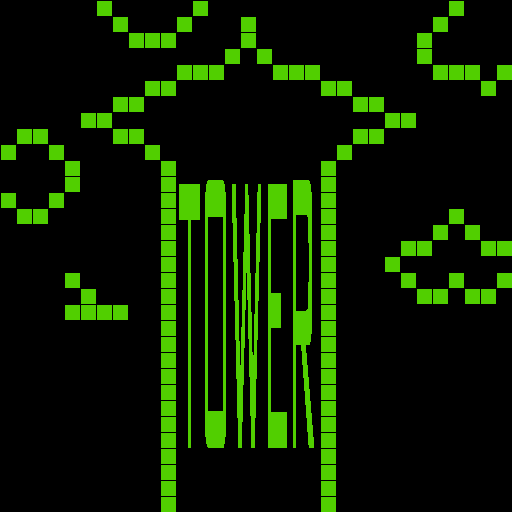
<style>
.page{position:relative;width:512px;height:512px;background:#000000}
.page>*{position:absolute;margin:0}
.t1{font:512px "BankGothic-Light";color:#51cf00;scale:0.07 1}
</style>
<div class="page">
<p class="t1" style="left:179px;top:180px;width:135px;height:268px">TOWER</p>
</div>
